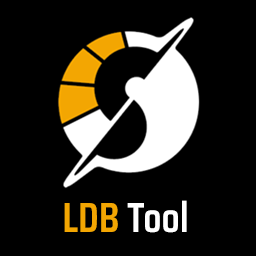
<style>
.page{position:relative;width:256px;height:256px;background:#000000}
.page>*{position:absolute;margin:0}
.t1{font:72px "SairaCondensed-SemiBold";color:#ffffff}
.t2{font:72px "SairaCondensed-SemiBold";color:#f3a602}
</style>
<div class="page">
<p class="t1" style="left:64px;top:200px;width:123px;height:33px"><span class="t2">LDB</span> Tool</p>
</div>
